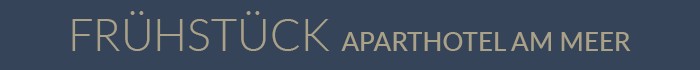
<style>
.page{position:relative;width:700px;height:70px;background:#36445a}
.page>*{position:absolute;margin:0}
.t1{font:26px "Lato-Medium";color:#aaa288;text-transform:uppercase}
.t2{font:45px "Lato-Light";color:#aaa288}
</style>
<div class="page">
<p class="t1" style="left:72px;top:11px;width:559px;height:40px"><span class="t2">FRÜHSTÜCK </span>Aparthotel Am Meer</p>
</div>
